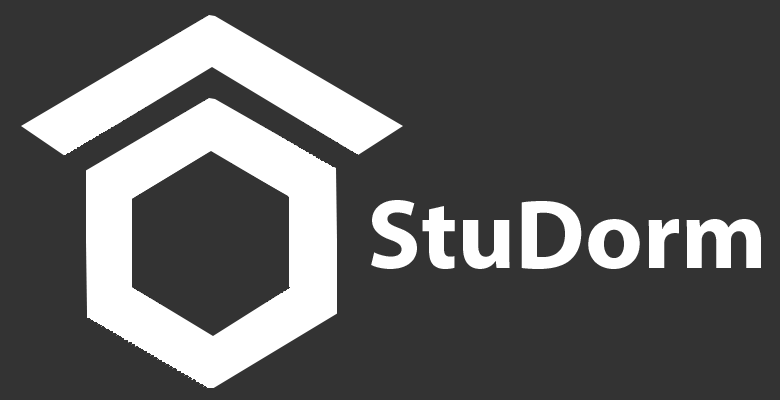
<style>
.page{position:relative;width:780px;height:400px;background:#333333}
.page>*{position:absolute;margin:0}
.t1{font:100px "MyriadPro-Bold";color:#ffffff}
</style>
<div class="page">
<p class="t1" style="left:371px;top:200px;width:390px;height:69px">StuDorm</p>
</div>
